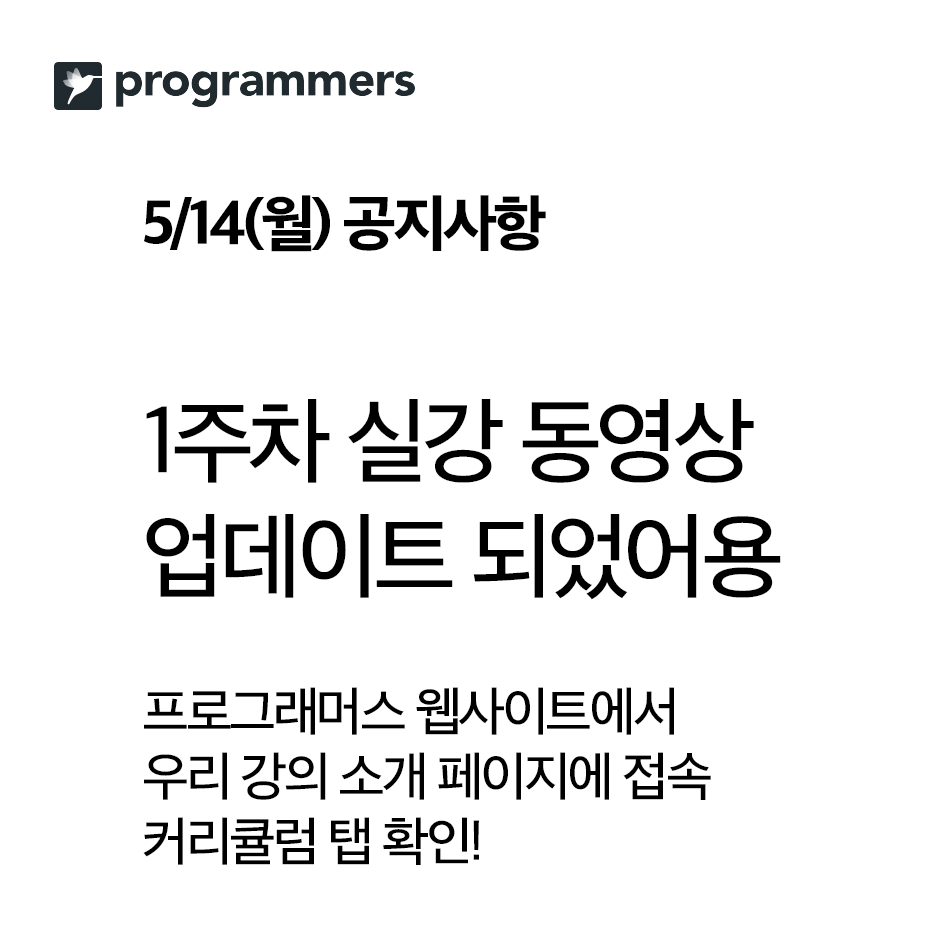
<style>
.page{position:relative;width:951px;height:951px;background:#ffffff}
.page>*{position:absolute;margin:0}
.t1{font:54.2px "AppleSDGothicNeo-Medium";letter-spacing:-0.06em;color:#000000}
.t2{font:62.5px "AppleSDGothicNeo-ExtraBold";letter-spacing:-0.06em;color:#000000}
.t3{font:95.8px "AppleSDGothicNeo-Medium";letter-spacing:-0.06em;color:#000000}
</style>
<div class="page">
<p class="t1" style="left:143px;top:195px;width:638px;height:670px"><span class="t2">5/14(월) 공지사항<br></span><span class="t3"><br>1주차 실강 동영상<br>업데이트 되었어용<br><br></span>프로그래머스 웹사이트에서<br>우리 강의 소개 페이지에 접속<br>커리큘럼 탭 확인!</p>
</div>
